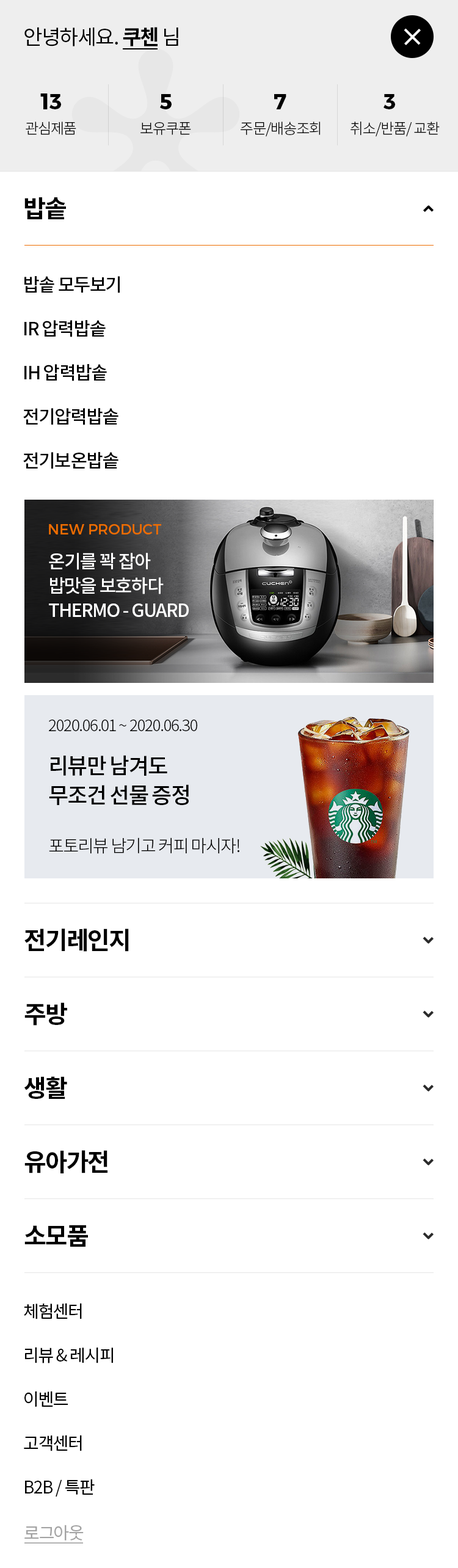
<style>
.page{position:relative;width:458px;height:1568px;background:#ffffff}
.page>*{position:absolute;margin:0}
.t1{font:20.8px "NotoSansCJKkr-Regular";letter-spacing:-0.05em;color:#000000}
.t2{font:20.8px "NotoSansCJKkr-Bold";letter-spacing:-0.05em;color:#000000}
.t3{font:22px "Montserrat-Bold";color:#000000}
.t4{font:14.7px "NotoSansCJKkr-Light";letter-spacing:-0.05em;color:#000000}
.t5{font:24.4px "NotoSansCJKkr-Bold";letter-spacing:-0.05em;color:#000000}
.t6{font:18.3px/44px "NotoSansCJKkr-Medium";letter-spacing:-0.05em;color:#000000}
.t7{font:14.7px "Montserrat-Regular";color:#ed6d00}
.t8{font:18.3px/24.4px "NotoSansCJKkr-Medium";letter-spacing:-0.05em;color:#ffffff}
.t9{font:15.9px "NotoSansCJKkr-Light";letter-spacing:-0.05em;color:#000000}
.t10{font:22px/29.3px "NotoSansCJKkr-Medium";letter-spacing:-0.05em;color:#000000}
.t11{font:17.1px "NotoSansCJKkr-Light";letter-spacing:-0.05em;color:#000000}
.t12{font:17.1px/44px "NotoSansCJKkr-Regular";letter-spacing:-0.05em;color:#000000}
.t13{font:17.1px "NotoSansCJKkr-Regular";letter-spacing:-0.05em;color:#a3a3a3}
</style>
<div class="page">
<p class="t1" style="left:24px;top:27px;width:154px;height:19px">안녕하세요. <span class="t2">쿠첸 </span>님</p>
<p class="t3" style="left:40px;top:93px;width:21px;height:16px">13</p>
<p class="t3" style="left:160px;top:94px;width:12px;height:15px">5</p>
<p class="t3" style="left:274px;top:94px;width:12px;height:15px">7</p>
<p class="t3" style="left:384px;top:94px;width:11px;height:15px">3</p>
<p class="t4" style="left:26px;top:122px;width:50px;height:13px">관심제품</p>
<p class="t4" style="left:140px;top:122px;width:51px;height:13px">보유쿠폰</p>
<p class="t4" style="left:241px;top:122px;width:79px;height:15px">주문/배송조회</p>
<p class="t4" style="left:351px;top:122px;width:89px;height:15px">취소/반품/ 교환</p>
<p class="t5" style="left:24px;top:197px;width:42px;height:22px">밥솥</p>
<p class="t6" style="left:23px;top:276px;width:97px;height:193px">밥솥 모두보기<br>IR 압력밥솥<br>IH 압력밥솥<br>전기압력밥솥<br>전기보온밥솥</p>
<p class="t7" style="left:49px;top:524px;width:112px;height:10px">NEW PRODUCT</p>
<p class="t8" style="left:49px;top:553px;width:140px;height:64px">온기를 꽉 잡아<br>밥맛을 보호하다<br>THERMO - GUARD</p>
<p class="t9" style="left:49px;top:720px;width:148px;height:11px">2020.06.01 ~ 2020.06.30</p>
<p class="t10" style="left:49px;top:755px;width:140px;height:50px">리뷰만 남겨도<br>무조건 선물 증정</p>
<p class="t11" style="left:49px;top:837px;width:190px;height:17px">포토리뷰 남기고 커피 마시자!</p>
<p class="t5" style="left:24px;top:928px;width:105px;height:24px">전기레인지</p>
<p class="t5" style="left:24px;top:1002px;width:43px;height:24px">주방</p>
<p class="t5" style="left:24px;top:1076px;width:43px;height:23px">생활</p>
<p class="t5" style="left:24px;top:1150px;width:84px;height:23px">유아가전</p>
<p class="t5" style="left:24px;top:1225px;width:64px;height:22px">소모품</p>
<p class="t12" style="left:24px;top:1303px;width:89px;height:194px">체험센터<br>리뷰 &amp; 레시피<br>이벤트<br>고객센터<br>B2B / 특판</p>
<p class="t13" style="left:24px;top:1525px;width:60px;height:16px">로그아웃</p>
</div>
